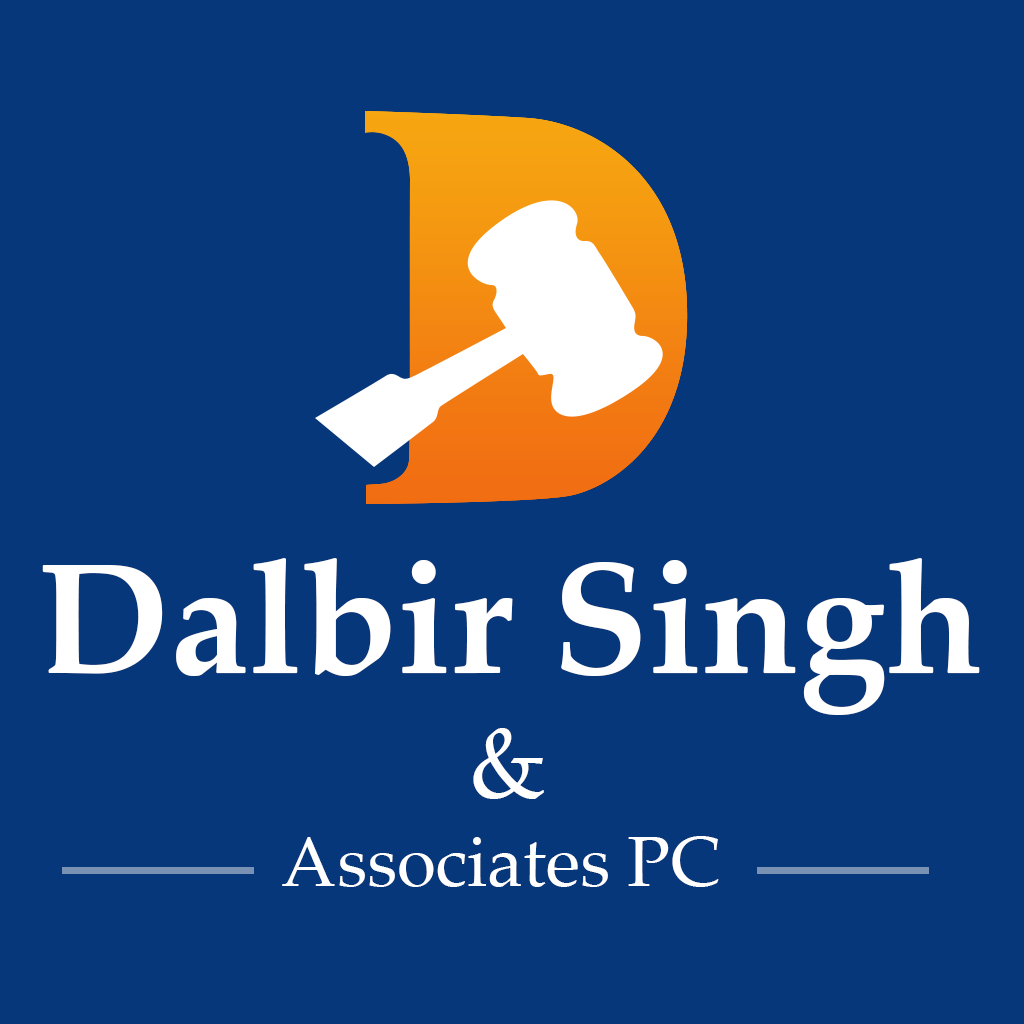
<style>
.page{position:relative;width:1024px;height:1024px;background:#06377a}
.page>*{position:absolute;margin:0}
.t1{font:158.3px "PalatinoLinotype-Bold";color:#ffffff}
.t2{font:100px "PalatinoLinotype-Roman";color:#ffffff}
.t3{font:70.8px "PalatinoLinotype-Roman";color:#ffffff}
</style>
<div class="page">
<p class="t1" style="left:42px;top:558px;width:938px;height:157px">Dalbir Singh</p>
<p class="t2" style="left:473px;top:728px;width:71px;height:71px">&amp;</p>
<p class="t3" style="left:282px;top:836px;width:437px;height:51px">Associates PC</p>
</div>
